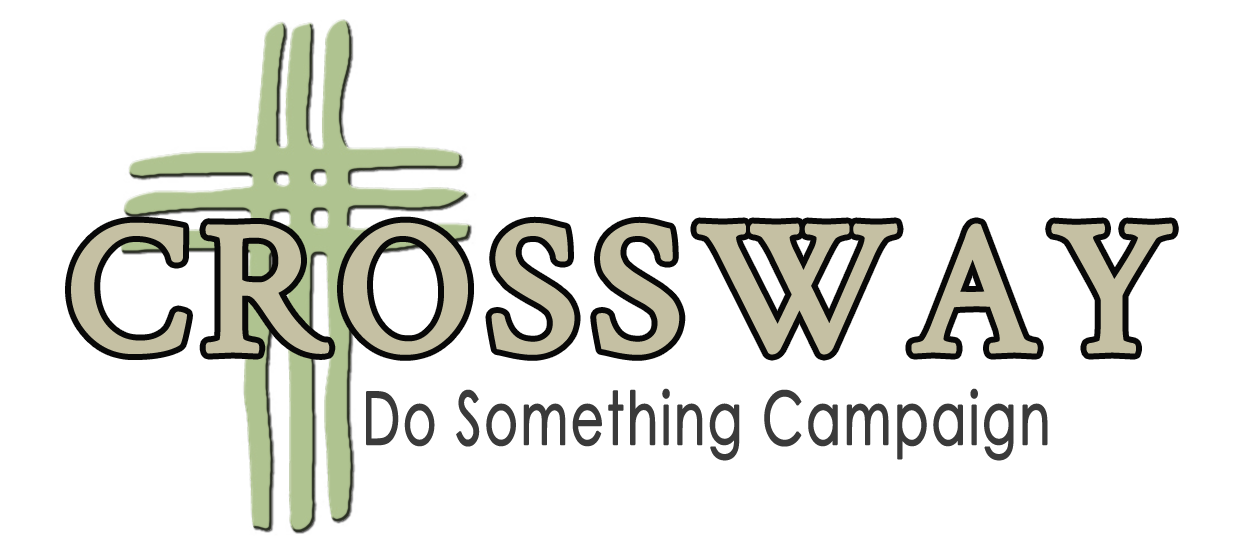
<style>
.page{position:relative;width:1240px;height:542px;background:#ffffff}
.page>*{position:absolute;margin:0}
.t1{font:73px "CenturyGothic";letter-spacing:0.04em;color:#3a3a3a;font-weight:bold;scale:0.68 1}
</style>
<div class="page">
<p class="t1" style="left:366px;top:388px;width:682px;height:73px">Do Something Campaign</p>
</div>
